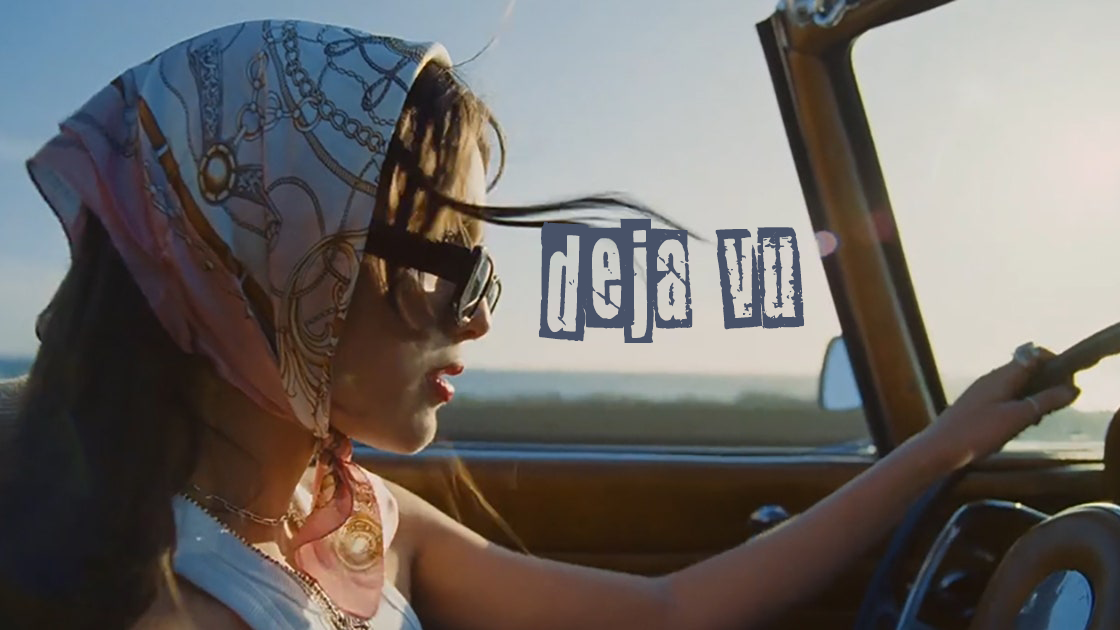
<style>
.page{position:relative;width:1120px;height:630px}
.page>*{position:absolute;margin:0}
.t1{font:124.2px "NewspaperCutoutWhiteOnBlac-Rg";color:#485268}
</style>
<div class="page">
<p class="t1" style="left:538px;top:218px;width:267px;height:125px">deja vu</p>
</div>
